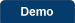
<style>
.page{position:relative;width:75px;height:23px;background:#043c6e}
.page>*{position:absolute;margin:0}
.t1{font:12px "Arial-BoldMT";color:#ffffff}
</style>
<div class="page">
<p class="t1" style="left:21px;top:7px;width:32px;height:9px">Demo</p>
</div>
